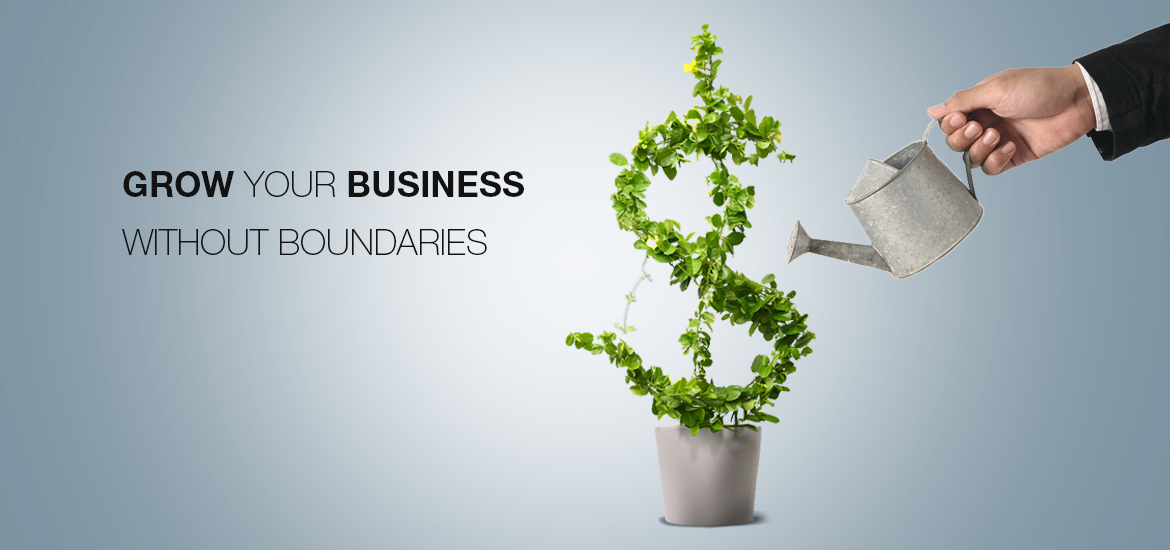
<style>
.page{position:relative;width:1170px;height:550px}
.page>*{position:absolute;margin:0}
.t1{font:35px/46px "HelveticaNeueCyr-Thin";color:#121212;text-transform:uppercase}
.t2{font:35px/46px "HelveticaNeueCyr-Bold";color:#121212;text-transform:uppercase}
</style>
<div class="page">
<p class="t1" style="left:122px;top:171px;width:402px;height:84px"><span class="t2">Grow</span> your <span class="t2">business <br></span>without boundaries</p>
</div>
